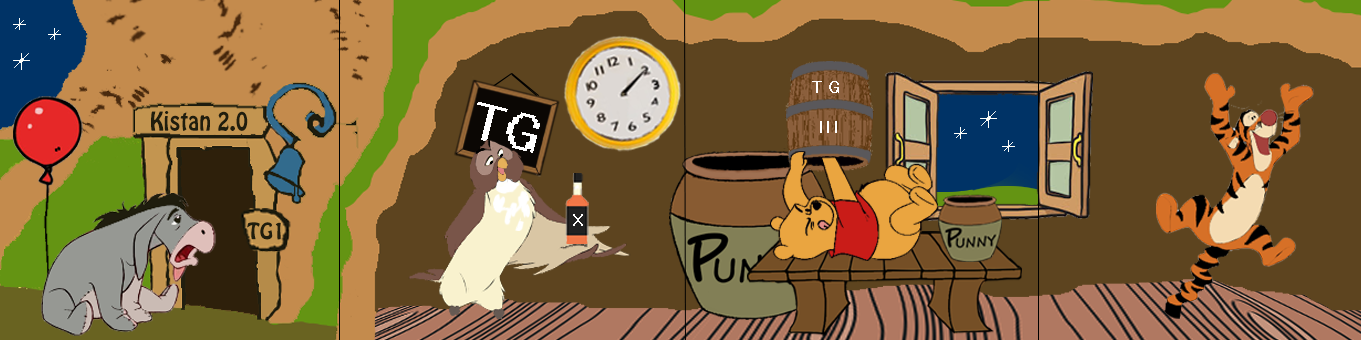
<style>
.page{position:relative;width:1361px;height:340px;background:#5d441f}
.page>*{position:absolute;margin:0}
.t1{font:22.8px "System";color:#fffefe}
.t2{font:46.6px "System";color:#fffefe}
.t3{font:23.1px "HoboStd";color:#1f1d0e;scale:0.92 1}
.t4{font:20px "HoboStd";color:#1f1d0e}
.t5{font:16.3px "System";color:#ffffff}
</style>
<div class="page">
<p class="t1" style="left:812px;top:81px;width:27px;height:12px">TG</p>
<p class="t2" style="left:477px;top:102px;width:63px;height:51px;rotate:14deg">TG</p>
<p class="t3" style="left:151px;top:111px;width:97px;height:20px">Kistan 2.0</p>
<p class="t1" style="left:820px;top:121px;width:17px;height:12px">III</p>
<p class="t4" style="left:247px;top:222px;width:34px;height:18px">TG1</p>
<p class="t5" style="left:573px;top:214px;width:10px;height:12px">X</p>
</div>
